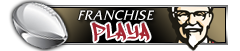
<style>
.page{position:relative;width:240px;height:51px;background:#ffffff}
.page>*{position:absolute;margin:0}
.t1{font:14px "FritzQuadrata-Italic";letter-spacing:0.05em;color:#ffffff}
.t2{font:23.1px "IllegalEdding";letter-spacing:0.1em;color:#a32732;scale:0.91 1}
</style>
<div class="page">
<p class="t1" style="left:77px;top:10px;width:77px;height:11px">FRANCHISE</p>
<p class="t2" style="left:91px;top:22px;width:59px;height:20px">Playa</p>
</div>
